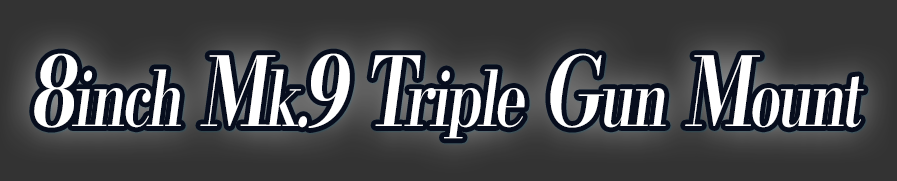
<style>
.page{position:relative;width:897px;height:181px;background:#333333}
.page>*{position:absolute;margin:0}
.t1{font:76.8px "KochoStd-Heavy";letter-spacing:-0.05em;color:#ffffff;font-style:italic;scale:0.75 1}
.t2{font:96px "KochoStd-Heavy";letter-spacing:-0.05em;color:#ffffff;font-style:italic;scale:0.75 1}
</style>
<div class="page">
<p class="t1" style="left:34px;top:53px;width:830px;height:86px"><span class="t2">8</span>inch<span class="t2"> M</span>k.<span class="t2">9 T</span>riple<span class="t2"> G</span>un<span class="t2"> M</span>ount</p>
</div>
